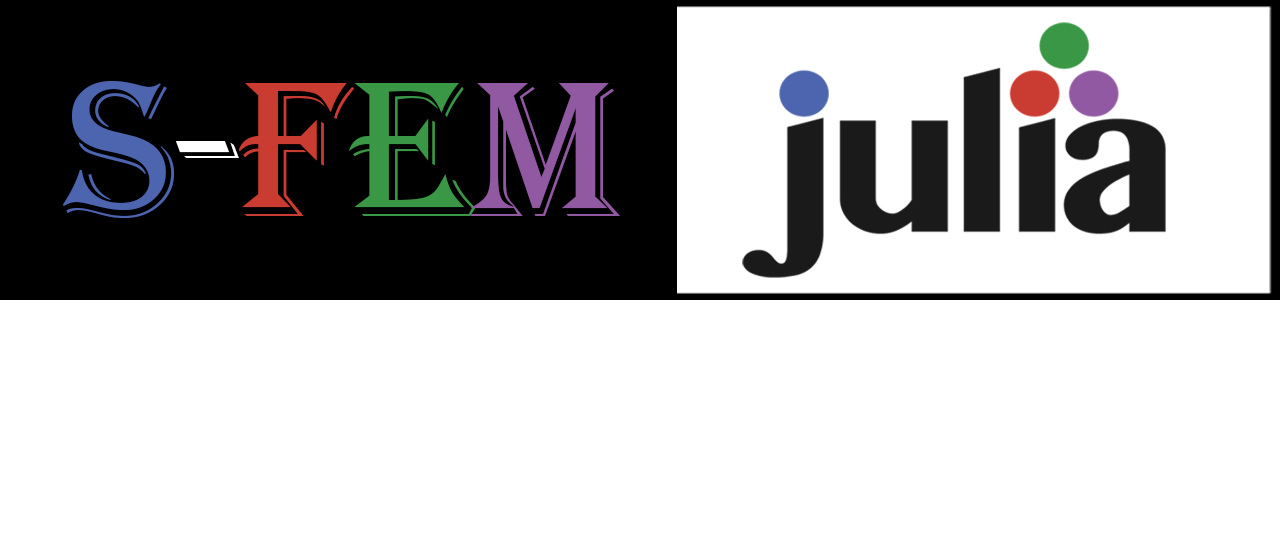
<style>
.page{position:relative;width:1280px;height:544px;background:#ffffff}
.page>*{position:absolute;margin:0}
.t1{font:200px "Algerian";color:#4d64ae}
.t2{font:200px "Algerian";color:#ffffff}
.t3{font:200px "Algerian";color:#ca3c32}
.t4{font:200px "Algerian";color:#399746}
.t5{font:200px "Algerian";color:#9259a3}
</style>
<div class="page">
<p class="t1" style="left:63px;top:81px;width:557px;height:137px">S<span class="t2">-</span><span class="t3">F</span><span class="t4">E</span><span class="t5">M</span></p>
</div>
